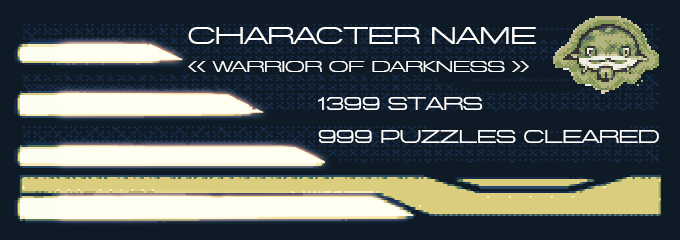
<style>
.page{position:relative;width:680px;height:240px;background:#0e1b26}
.page>*{position:absolute;margin:0}
.t1{font:24px "Miedinger-Regular";color:#ffffff}
.t2{font:16px "Miedinger-Regular";color:#ffffff}
.t3{font:18px "Miedinger-Regular";color:#ffffff}
</style>
<div class="page">
<p class="t1" style="left:188px;top:27px;width:348px;height:17px">Character name</p>
<p class="t2" style="left:188px;top:61px;width:341px;height:11px">&lt;&lt; warrior of darkness &gt;&gt;</p>
<p class="t3" style="left:318px;top:97px;width:165px;height:13px">1399 STARS</p>
<p class="t3" style="left:318px;top:130px;width:341px;height:13px">999 PUZZLES CLEARED</p>
</div>
